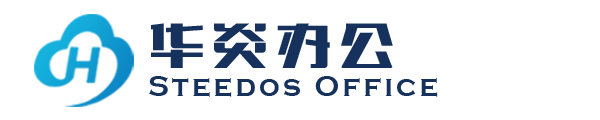
<style>
.page{position:relative;width:600px;height:120px;background:#ffffff}
.page>*{position:absolute;margin:0}
.t1{font:60px "FZCTHJW--GB1-0";letter-spacing:0.1em;color:#16325c;scale:0.96 1}
.t2{font:31px "CopperplateGothic-Bold";letter-spacing:0.1em;color:#16325c;scale:0.95 1}
</style>
<div class="page">
<p class="t1" style="left:151px;top:23px;width:242px;height:45px">华炎办公</p>
<p class="t2" style="left:149px;top:76px;width:289px;height:21px">Steedos Office</p>
</div>
